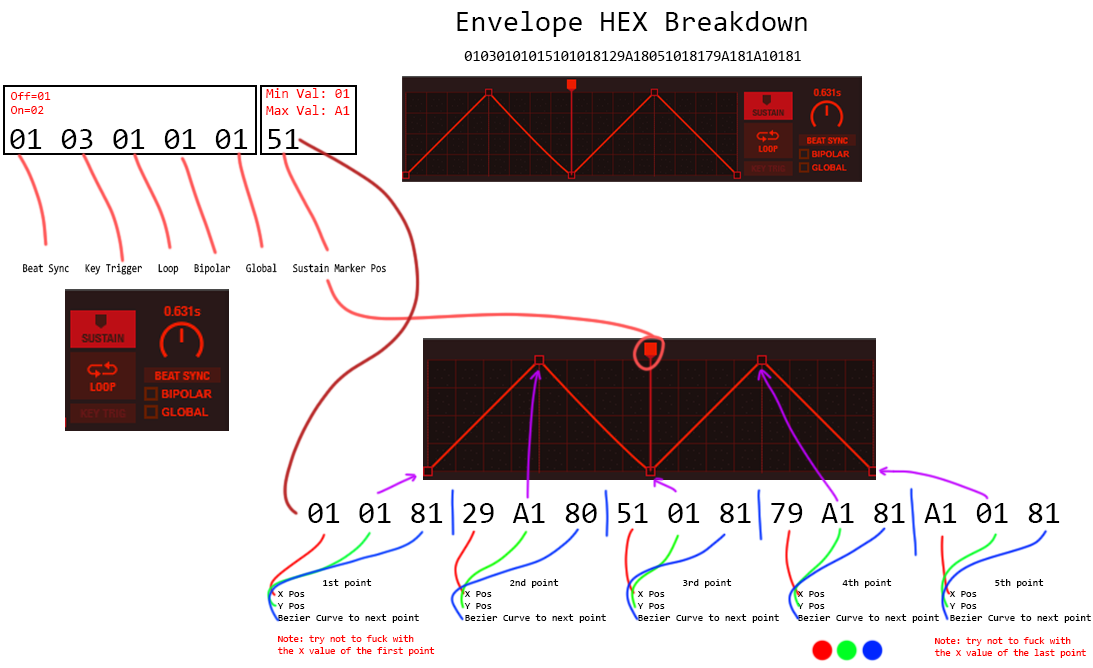
<style>
.page{position:relative;width:1093px;height:668px;background:#ffffff}
.page>*{position:absolute;margin:0}
.t1{font:29.3px "Consolas";color:#000000}
.t2{font:14.6px "Consolas";color:#000000}
.t3{font:13.9px "Consolas";color:#ff0000}
.t4{font:12.2px "Consolas";color:#ff0000}
.t5{font:12px "Consolas";color:#000000;scale:0.79 1}
.t6{font:9.9px "Consolas";color:#000000}
.t7{font:9.5px "Consolas";color:#ff0000}
</style>
<div class="page">
<p class="t1" style="left:457px;top:11px;width:350px;height:26px">Envelope HEX Breakdown</p>
<p class="t2" style="left:464px;top:51px;width:337px;height:10px">01030101015101018129A18051018179A181A10181</p>
<p class="t3" style="left:266px;top:88px;width:84px;height:27px">Min Val: 01<br>Max Val: A1</p>
<p class="t4" style="left:11px;top:92px;width:40px;height:22px">Off=01<br>On=02</p>
<p class="t5" style="left:23px;top:263px;width:363px;height:12px">Beat Sync   Key Trigger   Loop   Bipolar   Global   Sustain Marker Pos</p>
<p class="t6" style="left:277px;top:579px;width:142px;height:44px;text-align:center">1st point<br>X Pos<br>Y Pos<br>Bezier Curve to next point</p>
<p class="t6" style="left:464px;top:579px;width:142px;height:44px;text-align:center">2nd point<br>X Pos<br>Y Pos<br>Bezier Curve to next point</p>
<p class="t6" style="left:637px;top:579px;width:142px;height:44px;text-align:center">3rd point<br>X Pos<br>Y Pos<br>Bezier Curve to next point</p>
<p class="t6" style="left:797px;top:579px;width:142px;height:44px;text-align:center">4th point<br>X Pos<br>Y Pos<br>Bezier Curve to next point</p>
<p class="t6" style="left:949px;top:579px;width:142px;height:44px;text-align:center">5th point<br>X Pos<br>Y Pos<br>Bezier Curve to next point</p>
<p class="t7" style="left:277px;top:635px;width:158px;height:21px">Note: try not to fuck with <br>the X value of the first point</p>
<p class="t7" style="left:934px;top:637px;width:152px;height:21px">Note: try not to fuck with <br>the X value of the last point</p>
</div>
